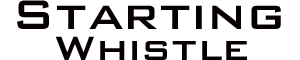
<style>
.page{position:relative;width:300px;height:60px;background:#ffffff}
.page>*{position:absolute;margin:0}
.t1{font:55px "BankGothic-Medium";color:#060000}
.t2{font:45px "BankGothic-Medium";color:#060000}
</style>
<div class="page">
<p class="t1" style="left:17px;top:0px;width:264px;height:29px">Starting</p>
<p class="t2" style="left:55px;top:36px;width:192px;height:24px">Whistle</p>
</div>
